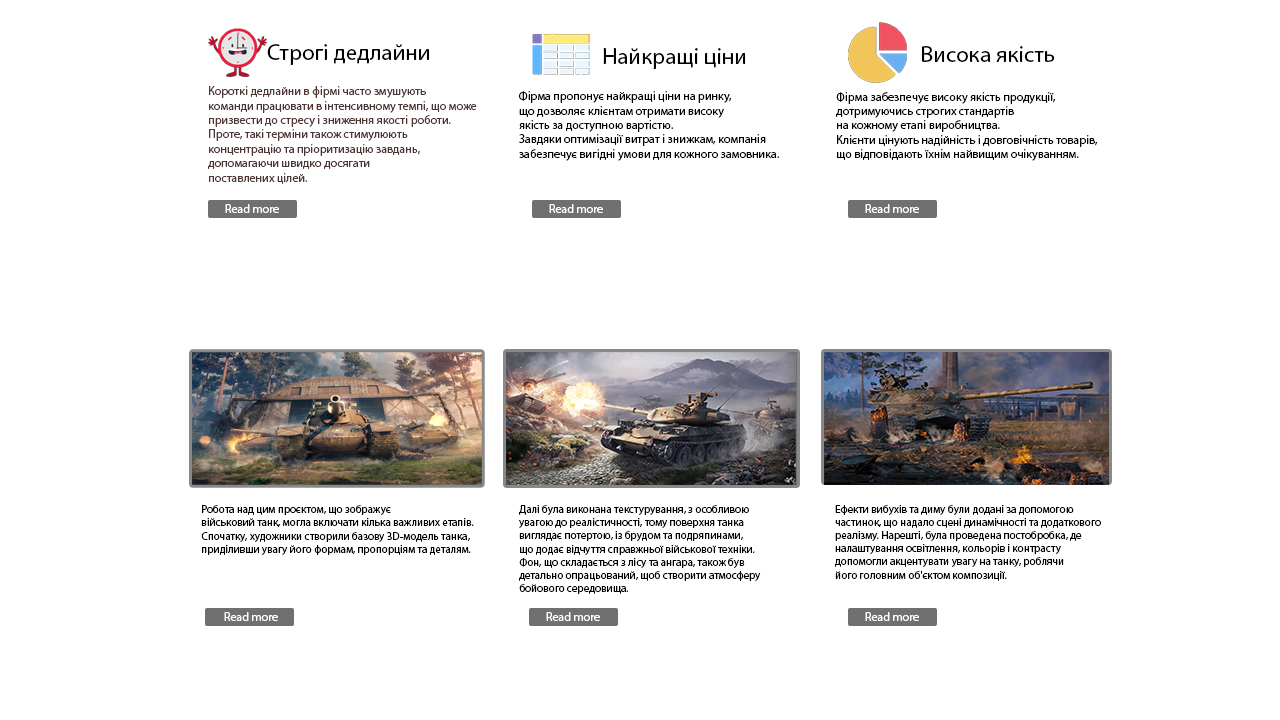
<style>
.page{position:relative;width:1280px;height:720px;background:#ffffff}
.page>*{position:absolute;margin:0}
.t1{font:23px "MyriadPro-Regular";color:#000000}
.t2{font:12px "MyriadPro-Regular";color:#503535}
.t3{font:12px "MyriadPro-Regular";color:#000000}
.t4{font:12px "MyriadPro-Regular";color:#ffffff}
.t5{font:11px "MyriadPro-Regular";color:#000000}
</style>
<div class="page">
<p class="t1" style="left:267px;top:44px;width:162px;height:21px">Строгі дедлайни</p>
<p class="t1" style="left:603px;top:48px;width:143px;height:21px">Найкращі ціни</p>
<p class="t1" style="left:922px;top:46px;width:133px;height:16px">Висока якість</p>
<p class="t2" style="left:208px;top:86px;width:269px;height:98px">Короткі дедлайни в фірмі часто змушують <br>команди працювати в інтенсивному темпі, що може <br>призвести до стресу і зниження якості роботи. <br>Проте, такі терміни також стимулюють <br>концентрацію та пріоритизацію завдань, <br>допомагаючи швидко досягати <br>поставлених цілей.</p>
<p class="t3" style="left:519px;top:91px;width:260px;height:70px">Фірма пропонує найкращі ціни на ринку, <br>що дозволяє клієнтам отримати високу <br>якість за доступною вартістю. <br>Завдяки оптимізації витрат і знижкам, компанія <br>забезпечує вигідні умови для кожного замовника.</p>
<p class="t3" style="left:836px;top:92px;width:262px;height:69px">Фірма забезпечує високу якість продукції, <br>дотримуючись строгих стандартів <br>на кожному етапі виробництва. <br>Клієнти цінують надійність і довговічність товарів, <br>що відповідають їхнім найвищим очікуванням.</p>
<p class="t4" style="left:225px;top:204px;width:54px;height:9px">Read more</p>
<p class="t4" style="left:549px;top:204px;width:54px;height:9px">Read more</p>
<p class="t4" style="left:865px;top:204px;width:54px;height:9px">Read more</p>
<p class="t5" style="left:201px;top:505px;width:273px;height:50px">Робота над цим проєктом, що зображує <br>військовий танк, могла включати кілька важливих етапів. <br>Спочатку, художники створили базову 3D-модель танка, <br>приділивши увагу його формам, пропорціям та деталям.</p>
<p class="t5" style="left:519px;top:505px;width:242px;height:89px">Далі була виконана текстурування, з особливою <br>увагою до реалістичності, тому поверхня танка <br>виглядає потертою, із брудом та подряпинами, <br>що додає відчуття справжньої військової техніки. <br>Фон, що складається з лісу та ангара, також був <br>детально опрацьований, щоб створити атмосферу <br>бойового середовища.</p>
<p class="t5" style="left:835px;top:505px;width:266px;height:76px">Ефекти вибухів та диму були додані за допомогою <br>частинок, що надало сцені динамічності та додаткового <br>реалізму. Нарешті, була проведена постобробка, де <br>налаштування освітлення, кольорів і контрасту <br>допомогли акцентувати увагу на танку, роблячи <br>його головним об'єктом композиції.</p>
<p class="t4" style="left:224px;top:612px;width:54px;height:9px">Read more</p>
<p class="t4" style="left:546px;top:612px;width:54px;height:9px">Read more</p>
<p class="t4" style="left:865px;top:612px;width:54px;height:9px">Read more</p>
</div>
